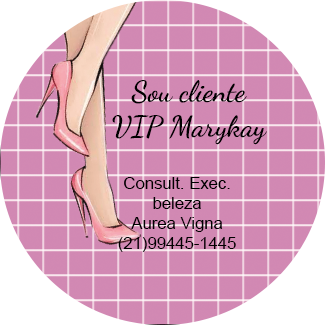
<style>
.page{position:relative;width:325px;height:325px;background:#d188b3}
.page>*{position:absolute;margin:0}
.t1{font:29.2px "DancingScript-Bold";color:#000000}
.t2{font:16.7px "ArialMT";color:#000000}
</style>
<div class="page">
<p class="t1" style="left:112px;top:80px;width:155px;height:65px;text-align:center">Sou cliente<br>VIP Marykay</p>
<p class="t2" style="left:118px;top:177px;width:118px;height:75px;text-align:center">Consult. Exec.<br>beleza<br>Aurea Vigna<br>(21)99445-1445</p>
</div>
